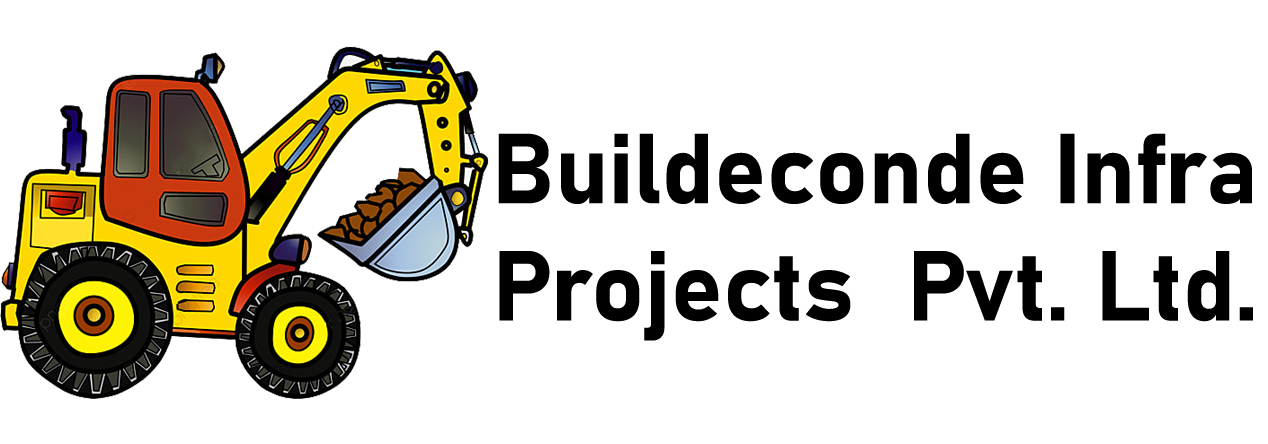
<style>
.page{position:relative;width:1268px;height:444px;background:#ffffff}
.page>*{position:absolute;margin:0}
.t1{font:97.6px "Bahnschrift-Bold";color:#000000}
</style>
<div class="page">
<p class="t1" style="left:498px;top:133px;width:755px;height:208px;text-align:center">Buildeconde Infra<br>Projects  Pvt. Ltd.</p>
</div>
